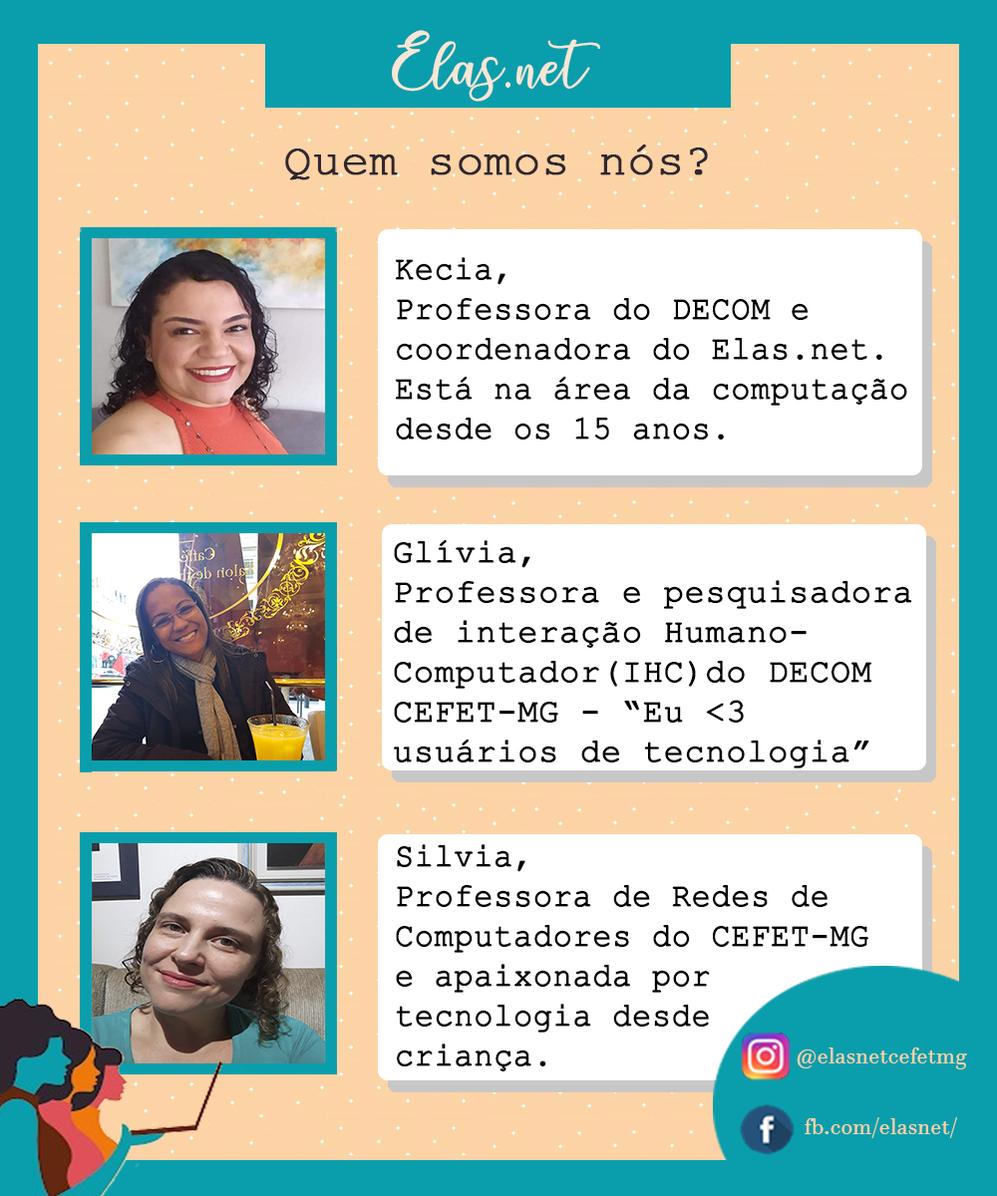
<style>
.page{position:relative;width:997px;height:1196px;background:#ffffff}
.page>*{position:absolute;margin:0}
.t1{font:55.8px "charlinda-Regular";color:#f7e6d6}
.t2{font:45.7px "CourierNewPSMT";color:#2e272f;font-weight:bold}
.t3{font:33.2px "CourierNewPSMT";color:#000000;font-weight:bold;scale:0.95 1}
.t4{font:33.2px "CourierNewPSMT";color:#000000;font-weight:bold}
.t5{font:23.3px "JavaneseText";color:#fcd3a5}
</style>
<div class="page">
<p class="t1" style="left:392px;top:30px;width:208px;height:72px">Elas.net</p>
<p class="t2" style="left:285px;top:145px;width:423px;height:35px">Quem somos nós?</p>
<p class="t3" style="left:395px;top:257px;width:512px;height:183px">Kecia,<br>Professora do DECOM e <br>coordenadora do Elas.net.<br>Está na área da computação<br>desde os 15 anos.</p>
<p class="t4" style="left:394px;top:539px;width:518px;height:230px">Glívia,<br>Professora e pesquisadora <br>de interação Humano-<br>Computador(IHC)do DECOM <br>CEFET-MG - “Eu &lt;3 <br>usuários de tecnologia”</p>
<p class="t3" style="left:396px;top:844px;width:472px;height:228px">Silvia,<br>Professora de Redes de <br>Computadores do CEFET-MG<br>e apaixonada por <br>tecnologia desde<br>criança.</p>
<p class="t5" style="left:796px;top:1048px;width:171px;height:22px">@elasnetcefetmg</p>
<p class="t5" style="left:804px;top:1117px;width:153px;height:21px">fb.com/elasnet/</p>
</div>
